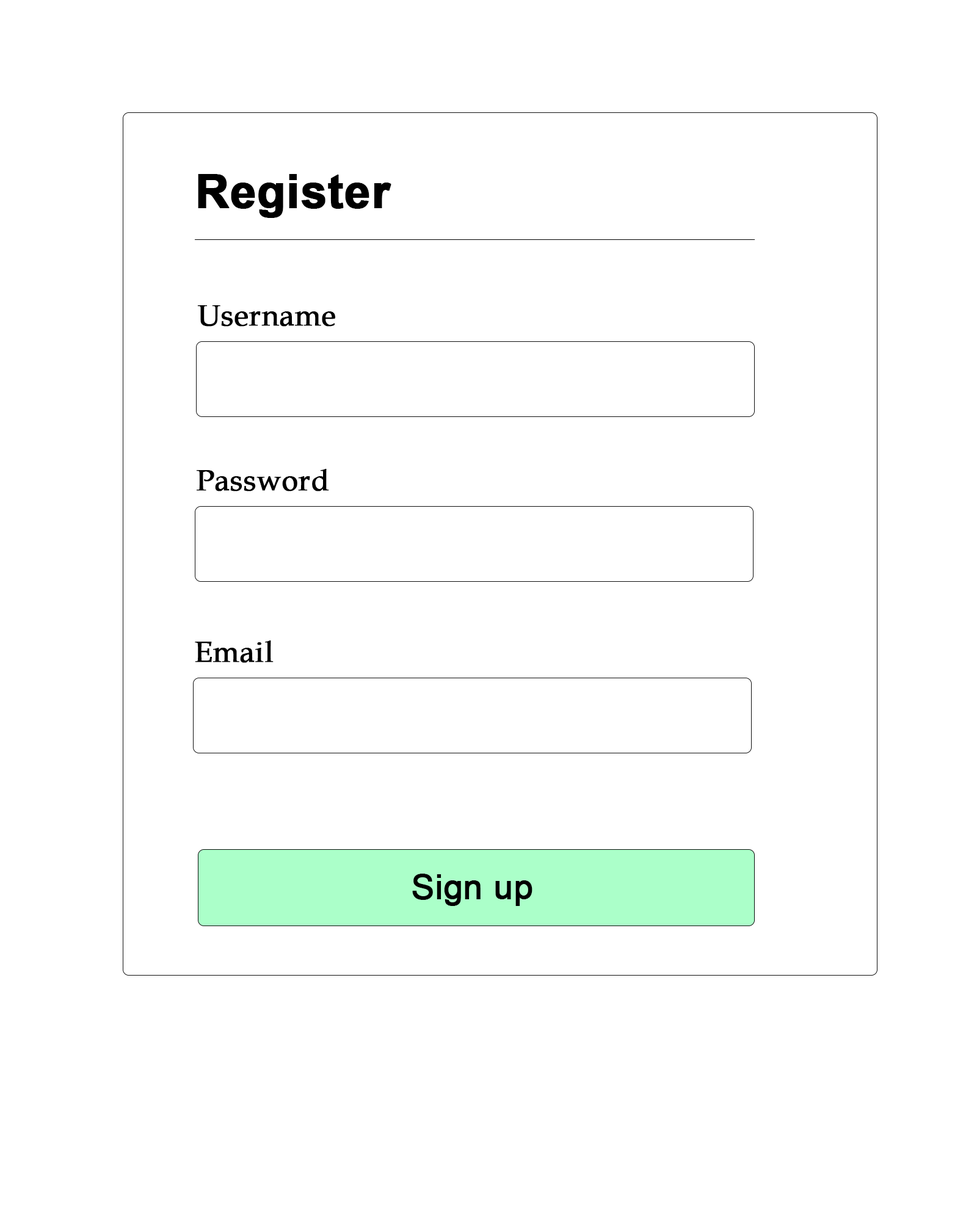
<style>
.page{position:relative;width:977px;height:1221px;background:#ffffff}
.page>*{position:absolute;margin:0}
.t1{font:46.4px "Arial-BoldMT";color:#000000;font-weight:bold}
.t2{font:29.3px "BookAntiqua";color:#000000;font-weight:bold}
.t3{font:34.2px "ArialMT";color:#000000;font-weight:bold}
</style>
<div class="page">
<p class="t1" style="left:198px;top:174px;width:193px;height:44px">Register</p>
<p class="t2" style="left:197px;top:305px;width:138px;height:22px">Username</p>
<p class="t2" style="left:197px;top:469px;width:132px;height:22px">Password</p>
<p class="t2" style="left:195px;top:640px;width:78px;height:23px">Email</p>
<p class="t3" style="left:412px;top:874px;width:120px;height:32px">Sign up</p>
</div>
